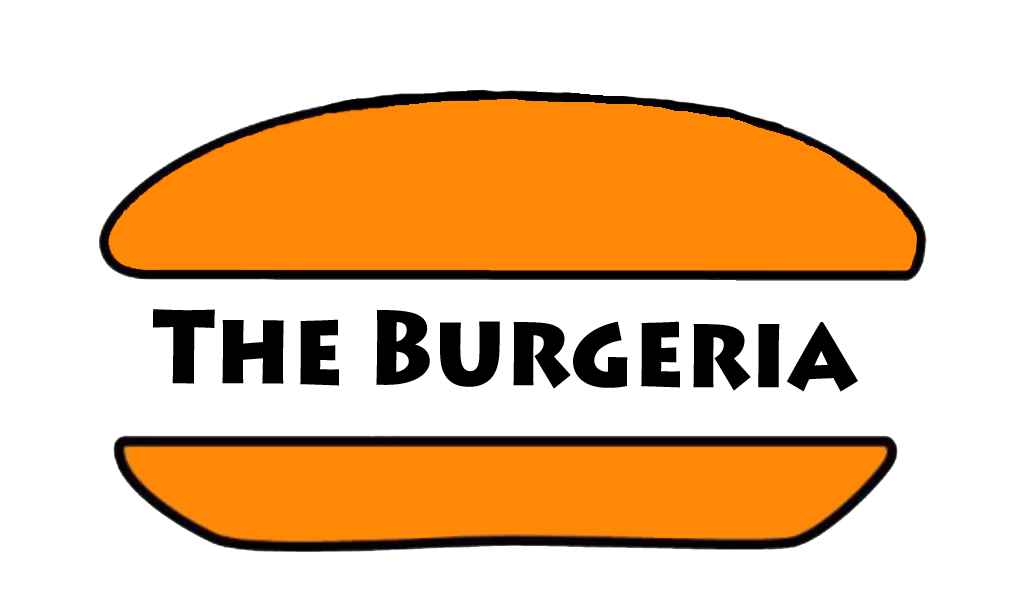
<style>
.page{position:relative;width:1024px;height:616px;background:#ffffff}
.page>*{position:absolute;margin:0}
.t1{font:104.2px "LithosPro-Black";color:#000000;scale:0.88 1}
</style>
<div class="page">
<p class="t1" style="left:153px;top:309px;width:705px;height:83px">The Burgeria</p>
</div>
